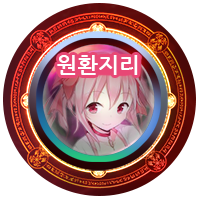
<style>
.page{position:relative;width:201px;height:201px;background:#ffffff}
.page>*{position:absolute;margin:0}
.t1{font:22.1px "NanumGothicBold";color:#ffffff}
</style>
<div class="page">
<p class="t1" style="left:57px;top:55px;width:81px;height:20px">원환지리</p>
</div>
